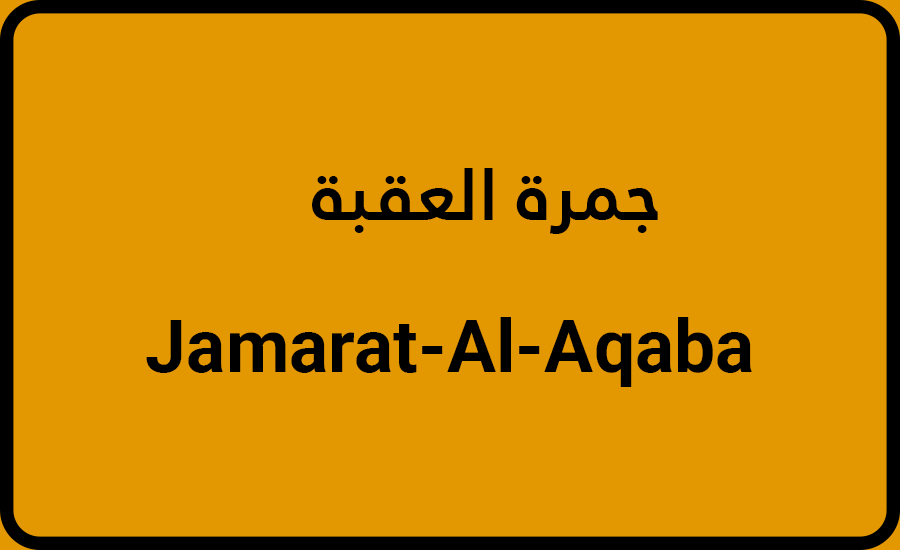
<style>
.page{position:relative;width:900px;height:550px;background:#e39700}
.page>*{position:absolute;margin:0}
.t1{font:73.3px "JannaLT-Bold";color:#000000}
.t2{font:73.3px "Roboto-Bold";color:#000000}
</style>
<div class="page">
<p class="t1" style="left:312px;top:168px;width:346px;height:66px">ﺔﺒﻘﻌﻟﺍ ةﺮﻤﺟ</p>
<p class="t2" style="left:146px;top:317px;width:606px;height:70px">Jamarat-Al-Aqaba</p>
</div>
